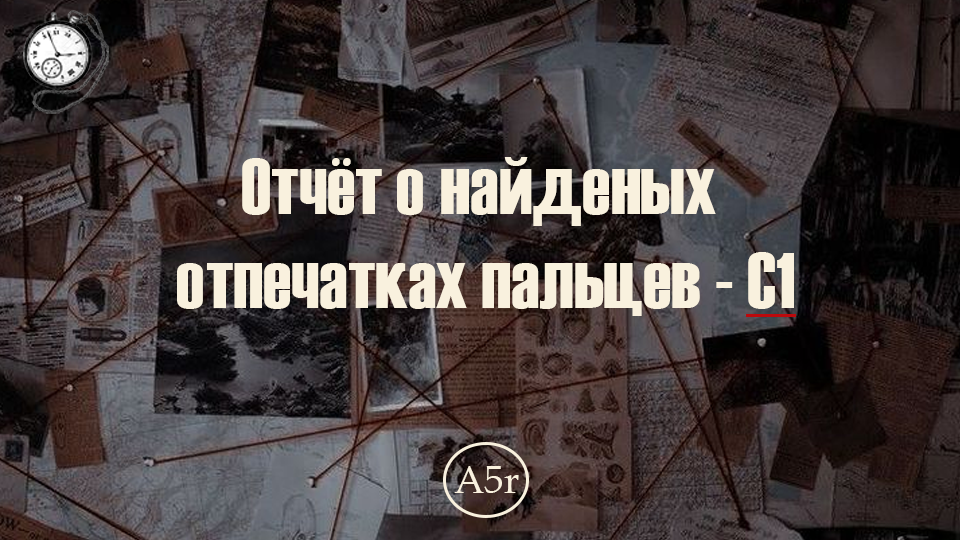
<style>
.page{position:relative;width:960px;height:540px}
.page>*{position:absolute;margin:0}
.t1{font:78.7px "Haettenschweiler";color:#f9f1de}
.t2{font:38.8px "BookAntiqua";color:#f9f1de}
</style>
<div class="page">
<p class="t1" style="left:177px;top:157px;width:617px;height:159px;text-align:center">Отчёт о найденых <br>отпечатках пальцев - C1</p>
<p class="t2" style="left:454px;top:466px;width:65px;height:27px">A5r</p>
</div>
